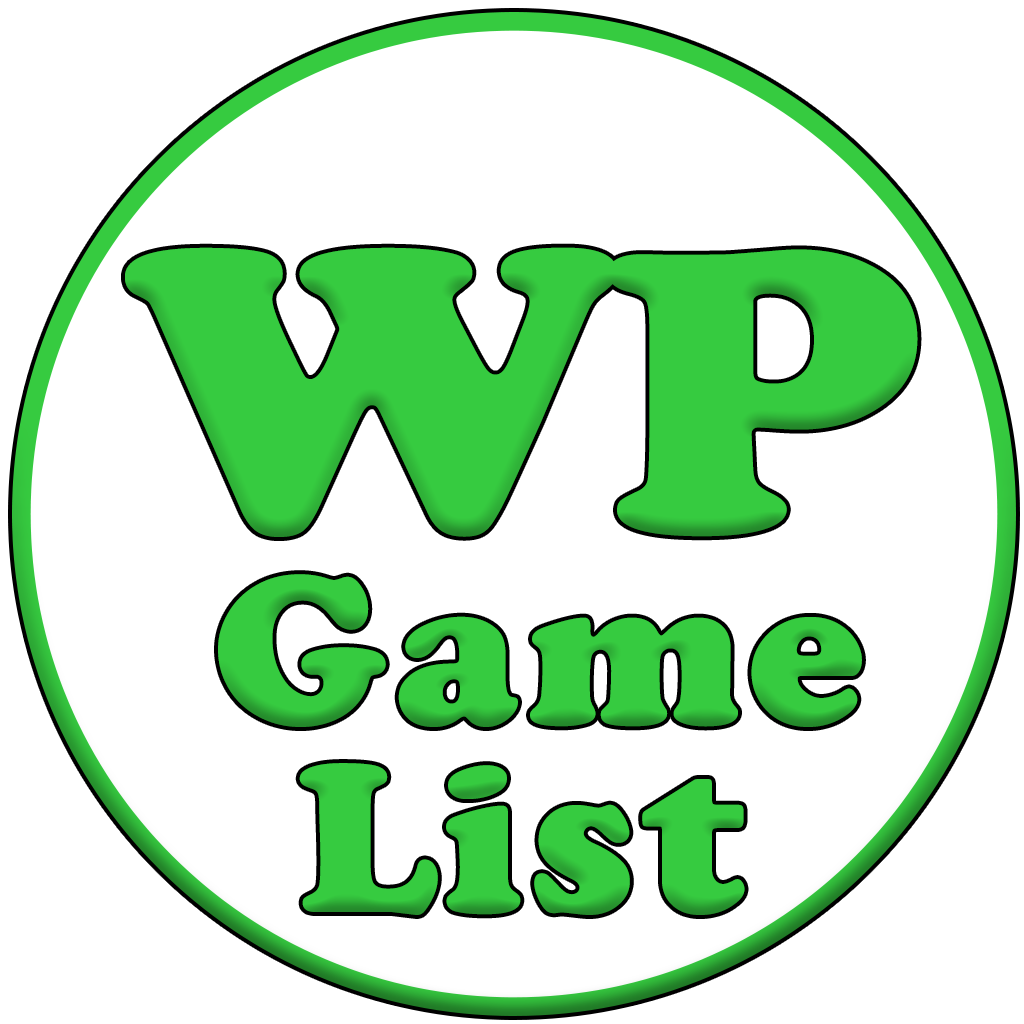
<style>
.page{position:relative;width:1024px;height:1024px;background:#ffffff}
.page>*{position:absolute;margin:0}
.t1{font:420px "CooperBlack";letter-spacing:-0.025em;color:#36cb40;scale:1.12 1}
.t2{font:220px "CooperBlack";letter-spacing:0.035em;color:#36cb40}
</style>
<div class="page">
<p class="t1" style="left:125px;top:247px;width:793px;height:290px">WP</p>
<p class="t2" style="left:218px;top:574px;width:644px;height:153px">Game</p>
<p class="t2" style="left:299px;top:763px;width:446px;height:152px">List</p>
</div>
